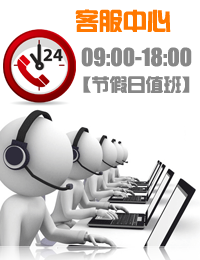
<style>
.page{position:relative;width:200px;height:260px;background:#ffffff}
.page>*{position:absolute;margin:0}
.t1{font:24px "¹ã½Ý¾ÓÃÔÄã×Ö¿â";color:#ff7800}
.t2{font:22.9px/24px "Impact";color:#878787}
.t3{font:18px/24px "¹ã½Ý¾ÓÃÔÄã×Ö¿â";color:#878787}
</style>
<div class="page">
<p class="t1" style="left:75px;top:9px;width:96px;height:23px">客服中心</p>
<p class="t2" style="left:81px;top:47px;width:111px;height:46px;text-align:center">09:00-18:00<br><span class="t3">【节假日值班】</span></p>
</div>
